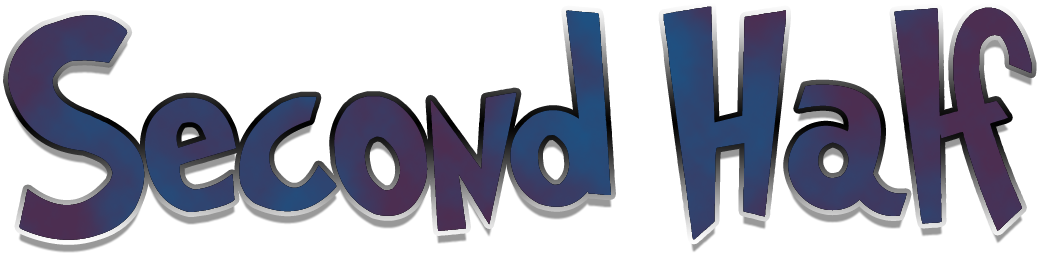
<style>
.page{position:relative;width:1038px;height:258px;background:#ffffff}
.page>*{position:absolute;margin:0}
.t1{font:250px "Grinched";color:#393c65}
</style>
<div class="page">
<p class="t1" style="left:8px;top:6px;width:1024px;height:234px">Second Half</p>
</div>
